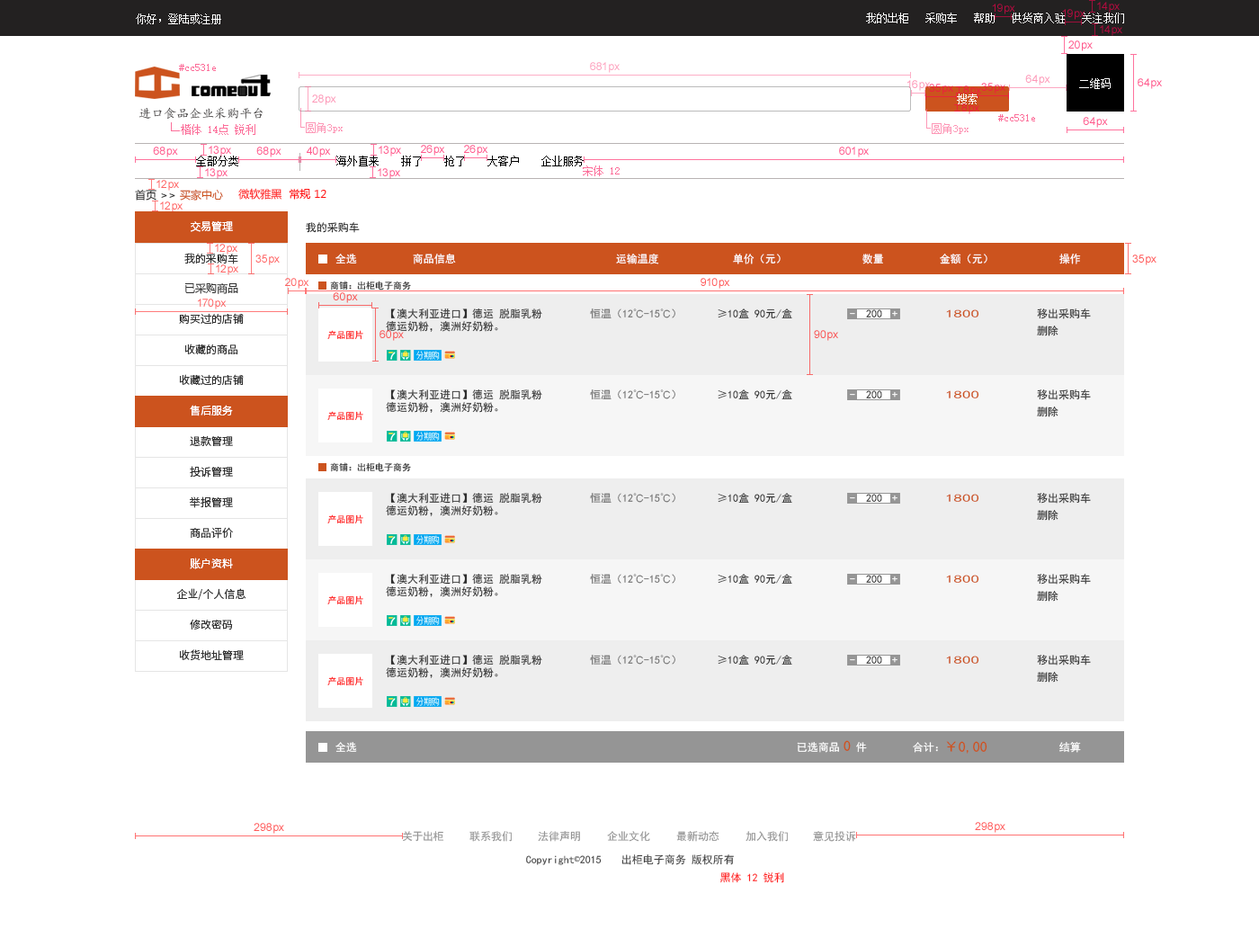
<style>
.page{position:relative;width:1259px;height:947px;background:#ffffff}
.page>*{position:absolute;margin:0}
.t1{font:10.8px "SimSun";color:#ffffff}
.t2{font:10.8px "SimSun";color:#fc6f9a}
.t3{font:12.6px "¿¬Ìå";color:#464343}
.t4{font:10.8px "SimSun";color:#000000}
.t5{font:10.8px "MicrosoftYaHei";color:#cc531e}
.t6{font:10.8px "MicrosoftYaHei";color:#2a2a2a}
.t7{font:10.8px "MicrosoftYaHei";color:#333333}
.t8{font:10.8px "MicrosoftYaHei";color:#ff1111}
.t9{font:10.8px "SourceHanSansCN-Normal";color:#ffffff}
.t10{font:10.8px "SimHei";color:#1d1d1d}
.t11{font:10.8px "SourceHanSansCN-Normal";color:#333333}
.t12{font:10.8px "SimHei";color:#ffffff}
.t13{font:9px "SimHei";color:#2f2f2f}
.t14{font:10.8px "SimHei";color:#2e2e2e}
.t15{font:10.8px "SimHei";color:#707070}
.t16{font:10.8px "SimHei"}
.t17{font:10.8px "SimHei";color:#cc531e;scale:1.59 1}
.t18{font:9px "SimHei"}
.t19{font:10.8px "SourceHanSansCN-Normal";color:#fefefe}
.t20{font:14.4px "SimHei";color:#cc531e}
.t21{font:10.8px "SimHei";color:#959595}
.t22{font:10.8px "SimHei";color:#434343}
.t23{font:10.8px "SimSun";color:#434343}
.t24{font:10.8px "SimHei";color:#ff2222}
</style>
<div class="page">
<p class="t1" style="left:136px;top:13px;width:85px;height:11px">你好，登陆或注册</p>
<p class="t1" style="left:866px;top:13px;width:258px;height:10px">我的出柜   采购车   帮助   供货商入驻   关注我们</p>
<p class="t2" style="left:179px;top:64px;width:37px;height:7px">#cc531e</p>
<p class="t1" style="left:1079px;top:78px;width:32px;height:11px">二维码</p>
<p class="t1" style="left:957px;top:94px;width:21px;height:10px">搜索</p>
<p class="t3" style="left:139px;top:107px;width:124px;height:13px">进口食品企业采购平台</p>
<p class="t2" style="left:998px;top:114px;width:37px;height:7px">#cc531e</p>
<p class="t4" style="left:196px;top:156px;width:42px;height:10px">全部分类</p>
<p class="t4" style="left:336px;top:156px;width:248px;height:10px">海外直来    拼了    抢了    大客户    企业服务</p>
<p class="t2" style="left:583px;top:165px;width:37px;height:11px">宋体 12</p>
<p class="t5" style="left:135px;top:189px;width:88px;height:12px"><span class="t6">首页 </span><span class="t7">&gt;&gt; </span>买家中心</p>
<p class="t8" style="left:238px;top:188px;width:88px;height:12px">微软雅黑  常规 12</p>
<p class="t9" style="left:191px;top:220px;width:42px;height:12px">交易管理</p>
<p class="t10" style="left:306px;top:222px;width:54px;height:11px">我的采购车</p>
<p class="t11" style="left:184px;top:253px;width:54px;height:11px">我的采购车</p>
<p class="t12" style="left:335px;top:254px;width:22px;height:10px">全选</p>
<p class="t12" style="left:413px;top:254px;width:43px;height:10px">商品信息</p>
<p class="t12" style="left:616px;top:254px;width:43px;height:10px">运输温度</p>
<p class="t12" style="left:733px;top:254px;width:48px;height:10px">单价（元）</p>
<p class="t12" style="left:862px;top:254px;width:22px;height:10px">数量</p>
<p class="t12" style="left:940px;top:254px;width:48px;height:10px">金额（元）</p>
<p class="t12" style="left:1059px;top:254px;width:22px;height:10px">操作</p>
<p class="t13" style="left:330px;top:281px;width:81px;height:9px">商铺：出柜电子商务</p>
<p class="t7" style="left:184px;top:283px;width:54px;height:11px">已采购商品</p>
<p class="t11" style="left:179px;top:313px;width:65px;height:11px">购买过的店铺</p>
<p class="t14" style="left:386px;top:308px;width:156px;height:24px;text-align:right">【澳大利亚进口】德运 脱脂乳粉<br>德运奶粉，澳洲好奶粉。</p>
<p class="t15" style="left:590px;top:308px;width:85px;height:11px">恒温（12℃-15℃）</p>
<p class="t14" style="left:718px;top:308px;width:74px;height:11px">≥10盒 90元/盒</p>
<p class="t12" style="left:850px;top:313px;width:5px;height:2px">-</p>
<p class="t16" style="left:866px;top:309px;width:16px;height:8px">200</p>
<p class="t12" style="left:892px;top:310px;width:6px;height:7px">+</p>
<p class="t17" style="left:946px;top:309px;width:33px;height:8px">1800</p>
<p class="t14" style="left:1037px;top:308px;width:54px;height:11px">移出采购车</p>
<p class="t14" style="left:1037px;top:326px;width:22px;height:10px">删除</p>
<p class="t18" style="left:327px;top:330px;width:36px;height:10px">产品图片</p>
<p class="t11" style="left:184px;top:344px;width:54px;height:10px">收藏的商品</p>
<p class="t11" style="left:179px;top:374px;width:65px;height:11px">收藏过的店铺</p>
<p class="t14" style="left:386px;top:389px;width:156px;height:24px;text-align:right">【澳大利亚进口】德运 脱脂乳粉<br>德运奶粉，澳洲好奶粉。</p>
<p class="t15" style="left:590px;top:389px;width:85px;height:11px">恒温（12℃-15℃）</p>
<p class="t14" style="left:718px;top:389px;width:74px;height:11px">≥10盒 90元/盒</p>
<p class="t14" style="left:1037px;top:389px;width:54px;height:11px">移出采购车</p>
<p class="t12" style="left:850px;top:394px;width:5px;height:2px">-</p>
<p class="t16" style="left:866px;top:390px;width:16px;height:8px">200</p>
<p class="t12" style="left:892px;top:391px;width:6px;height:7px">+</p>
<p class="t17" style="left:946px;top:390px;width:33px;height:8px">1800</p>
<p class="t19" style="left:190px;top:405px;width:43px;height:11px">售后服务</p>
<p class="t18" style="left:327px;top:411px;width:36px;height:10px">产品图片</p>
<p class="t14" style="left:1037px;top:407px;width:22px;height:10px">删除</p>
<p class="t11" style="left:190px;top:435px;width:43px;height:11px">退款管理</p>
<p class="t11" style="left:190px;top:466px;width:43px;height:12px">投诉管理</p>
<p class="t13" style="left:330px;top:462px;width:81px;height:10px">商铺：出柜电子商务</p>
<p class="t11" style="left:190px;top:496px;width:43px;height:12px">举报管理</p>
<p class="t14" style="left:386px;top:493px;width:156px;height:23px;text-align:right">【澳大利亚进口】德运 脱脂乳粉<br>德运奶粉，澳洲好奶粉。</p>
<p class="t15" style="left:590px;top:493px;width:85px;height:11px">恒温（12℃-15℃）</p>
<p class="t14" style="left:718px;top:493px;width:74px;height:11px">≥10盒 90元/盒</p>
<p class="t12" style="left:850px;top:497px;width:5px;height:2px">-</p>
<p class="t16" style="left:866px;top:494px;width:16px;height:8px">200</p>
<p class="t12" style="left:892px;top:495px;width:6px;height:6px">+</p>
<p class="t17" style="left:946px;top:494px;width:33px;height:8px">1800</p>
<p class="t14" style="left:1037px;top:493px;width:54px;height:11px">移出采购车</p>
<p class="t14" style="left:1037px;top:510px;width:22px;height:11px">删除</p>
<p class="t18" style="left:327px;top:514px;width:36px;height:10px">产品图片</p>
<p class="t11" style="left:190px;top:527px;width:43px;height:12px">商品评价</p>
<p class="t19" style="left:190px;top:558px;width:43px;height:11px">账户资料</p>
<p class="t14" style="left:386px;top:574px;width:156px;height:23px;text-align:right">【澳大利亚进口】德运 脱脂乳粉<br>德运奶粉，澳洲好奶粉。</p>
<p class="t15" style="left:590px;top:574px;width:85px;height:11px">恒温（12℃-15℃）</p>
<p class="t14" style="left:718px;top:574px;width:74px;height:11px">≥10盒 90元/盒</p>
<p class="t12" style="left:850px;top:578px;width:5px;height:2px">-</p>
<p class="t16" style="left:866px;top:575px;width:16px;height:8px">200</p>
<p class="t12" style="left:892px;top:576px;width:6px;height:6px">+</p>
<p class="t17" style="left:946px;top:575px;width:33px;height:8px">1800</p>
<p class="t14" style="left:1037px;top:574px;width:54px;height:11px">移出采购车</p>
<p class="t11" style="left:176px;top:588px;width:70px;height:12px">企业/个人信息</p>
<p class="t14" style="left:1037px;top:591px;width:22px;height:11px">删除</p>
<p class="t18" style="left:327px;top:595px;width:36px;height:10px">产品图片</p>
<p class="t11" style="left:190px;top:619px;width:43px;height:11px">修改密码</p>
<p class="t11" style="left:179px;top:649px;width:65px;height:12px">收货地址管理</p>
<p class="t14" style="left:386px;top:655px;width:156px;height:23px;text-align:right">【澳大利亚进口】德运 脱脂乳粉<br>德运奶粉，澳洲好奶粉。</p>
<p class="t15" style="left:590px;top:655px;width:85px;height:11px">恒温（12℃-15℃）</p>
<p class="t14" style="left:718px;top:655px;width:74px;height:11px">≥10盒 90元/盒</p>
<p class="t12" style="left:850px;top:659px;width:5px;height:2px">-</p>
<p class="t16" style="left:866px;top:656px;width:16px;height:8px">200</p>
<p class="t12" style="left:892px;top:657px;width:6px;height:6px">+</p>
<p class="t17" style="left:946px;top:656px;width:33px;height:8px">1800</p>
<p class="t14" style="left:1037px;top:655px;width:54px;height:11px">移出采购车</p>
<p class="t18" style="left:327px;top:676px;width:36px;height:10px">产品图片</p>
<p class="t14" style="left:1037px;top:672px;width:22px;height:11px">删除</p>
<p class="t12" style="left:335px;top:742px;width:22px;height:11px">全选</p>
<p class="t12" style="left:797px;top:742px;width:70px;height:11px">已选商品   件</p>
<p class="t20" style="left:844px;top:740px;width:7px;height:11px">0</p>
<p class="t12" style="left:913px;top:742px;width:25px;height:11px">合计：</p>
<p class="t20" style="left:946px;top:741px;width:42px;height:13px">￥0,00</p>
<p class="t12" style="left:1059px;top:742px;width:22px;height:11px">结算</p>
<p class="t21" style="left:402px;top:831px;width:42px;height:11px">关于出柜</p>
<p class="t21" style="left:469px;top:831px;width:43px;height:11px">联系我们</p>
<p class="t21" style="left:538px;top:831px;width:42px;height:11px">法律声明</p>
<p class="t21" style="left:607px;top:831px;width:43px;height:11px">企业文化</p>
<p class="t21" style="left:676px;top:831px;width:43px;height:11px">最新动态</p>
<p class="t21" style="left:746px;top:831px;width:42px;height:11px">加入我们</p>
<p class="t21" style="left:813px;top:831px;width:43px;height:11px">意见投诉</p>
<p class="t22" style="left:526px;top:855px;width:76px;height:10px">Copyright<span class="t23">©</span>2015</p>
<p class="t22" style="left:621px;top:854px;width:65px;height:11px">出柜电子商务</p>
<p class="t22" style="left:692px;top:854px;width:42px;height:11px">版权所有</p>
<p class="t24" style="left:719px;top:872px;width:65px;height:11px">黑体 12 锐利</p>
</div>
